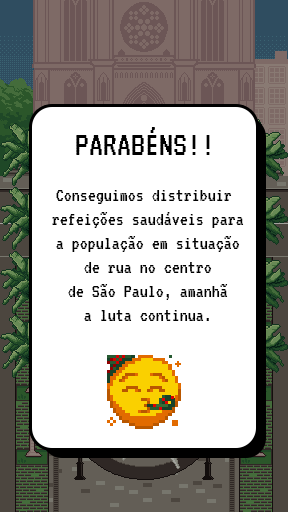
<style>
.page{position:relative;width:288px;height:512px;background:#ffffff}
.page>*{position:absolute;margin:0}
.t1{font:35px "VT323-Regular";color:#000000}
.t2{font:20px "VT323-Regular";color:#000000}
</style>
<div class="page">
<p class="t1" style="left:76px;top:127px;width:134px;height:28px">PARABÉNS!!</p>
<p class="t2" style="left:52px;top:190px;width:192px;height:131px;text-align:center">Conseguimos distribuir<br> refeições saudáveis para<br> a população em situação<br> de rua no centro<br> de São Paulo, amanhã<br> a luta continua.</p>
</div>
